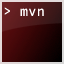
<style>
.page{position:relative;width:64px;height:64px}
.page>*{position:absolute;margin:0}
.t1{font:14px "AndaleMono";color:#ffffff}
</style>
<div class="page">
<p class="t1" style="left:4px;top:7px;width:40px;height:9px">&gt; mvn</p>
</div>
